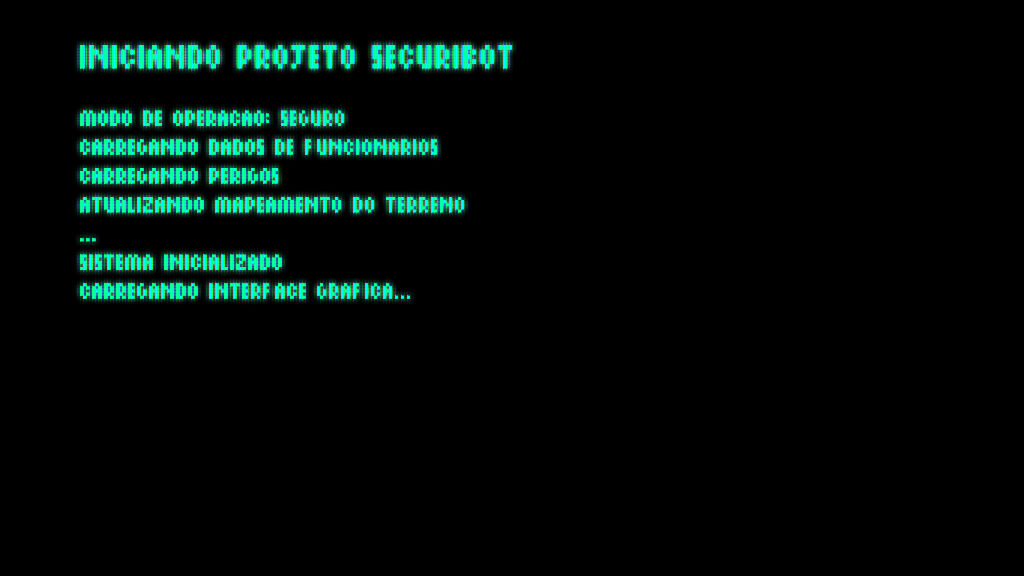
<style>
.page{position:relative;width:1024px;height:576px;background:#000000}
.page>*{position:absolute;margin:0}
.t1{font:24px "PixelSix14";color:#00ffa8}
.t2{font:36px "PixelSix14";color:#00ffa8}
</style>
<div class="page">
<p class="t1" style="left:80px;top:45px;width:432px;height:254px"><span class="t2">iniciando projeto securibot<br></span><br>modo de operacao: seguro<br>carregando dados de funcionarios<br>carregando perigos<br>atualizando mapeamento do terreno<br>...<br>sistema inicializado<br>carregando interface grafica...</p>
</div>
